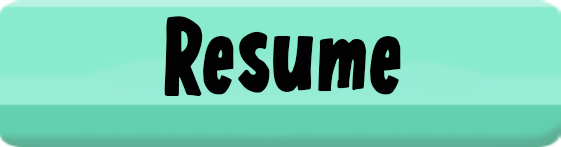
<style>
.page{position:relative;width:561px;height:147px;background:#89ebce}
.page>*{position:absolute;margin:0}
.t1{font:104.2px "LuTunaFREE";color:#020202}
</style>
<div class="page">
<p class="t1" style="left:164px;top:16px;width:237px;height:80px">Resume</p>
</div>
